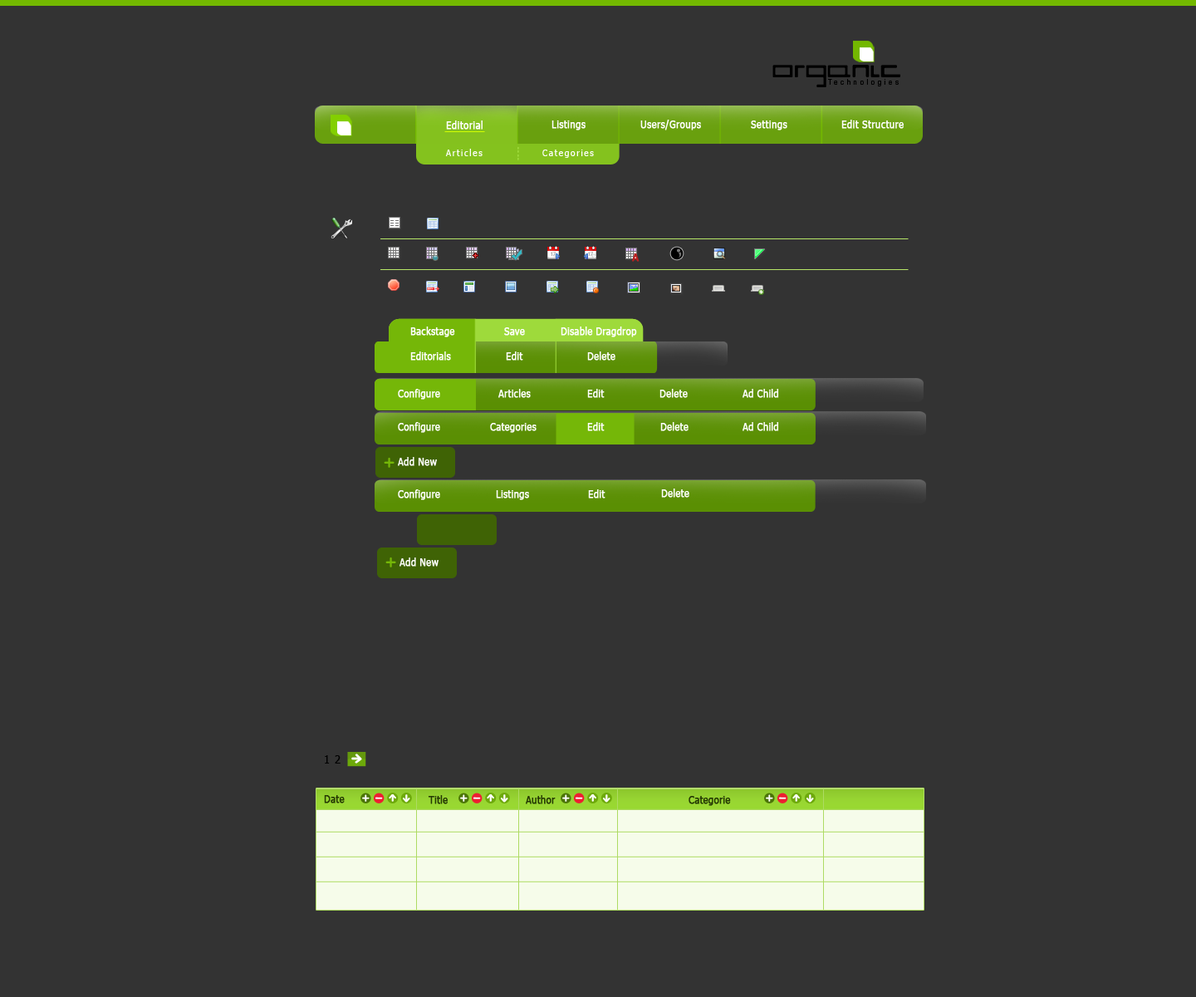
<style>
.page{position:relative;width:1196px;height:997px;background:#333333}
.page>*{position:absolute;margin:0}
.t1{font:53.1px "Jiggajigga";letter-spacing:-0.03em;color:#000000}
.t2{font:7px "EurostileLTStd-Cn";letter-spacing:0.4em;color:#000000;scale:1.08 1}
.t3{font:10px "Tahoma";letter-spacing:0.02em;color:#ffffff;font-weight:bold;scale:0.94 1}
.t4{font:9.1px "Tahoma";letter-spacing:0.15em;color:#ffffff;scale:0.94 1}
.t5{font:8.3px "Tahoma";letter-spacing:0.1em;color:#abe649;scale:0.94 1}
.t6{font:10px "Tahoma";letter-spacing:0.005em;color:#ffffff;font-weight:bold;scale:0.94 1}
.t7{font:11.6px "Tahoma";letter-spacing:0.005em;color:#000000;scale:0.94 1}
.t8{font:10px "Tahoma";letter-spacing:0.005em;color:#253903;font-weight:bold;scale:0.94 1}
.t9{font:10px "Tahoma";letter-spacing:0.005em;color:#243803;font-weight:bold;scale:0.94 1}
</style>
<div class="page">
<p class="t1" style="left:773px;top:56px;width:127px;height:31px">ORGANIC</p>
<p class="t2" style="left:828px;top:79px;width:71px;height:7px">Technologies</p>
<p class="t3" style="left:446px;top:120px;width:37px;height:10px">Editorial</p>
<p class="t3" style="left:552px;top:120px;width:34px;height:10px">Listings</p>
<p class="t3" style="left:640px;top:120px;width:61px;height:10px">Users/Groups</p>
<p class="t3" style="left:751px;top:120px;width:37px;height:10px">Settings</p>
<p class="t3" style="left:842px;top:120px;width:62px;height:9px">Edit Structure</p>
<p class="t4" style="left:445px;top:149px;width:38px;height:7px">Articles</p>
<p class="t5" style="left:518px;top:146px;width:1px;height:14px;rotate:-90deg">----</p>
<p class="t4" style="left:542px;top:150px;width:52px;height:8px">Categories</p>
<p class="t6" style="left:410px;top:326px;width:45px;height:11px">Backstage</p>
<p class="t6" style="left:504px;top:327px;width:21px;height:9px">Save</p>
<p class="t6" style="left:561px;top:326px;width:76px;height:11px">Disable Dragdrop</p>
<p class="t6" style="left:410px;top:351px;width:41px;height:10px">Editorials</p>
<p class="t6" style="left:506px;top:351px;width:17px;height:10px">Edit</p>
<p class="t6" style="left:587px;top:351px;width:29px;height:10px">Delete</p>
<p class="t6" style="left:398px;top:389px;width:42px;height:11px">Configure</p>
<p class="t6" style="left:498px;top:389px;width:33px;height:9px">Articles</p>
<p class="t6" style="left:587px;top:389px;width:18px;height:9px">Edit</p>
<p class="t6" style="left:660px;top:389px;width:28px;height:9px">Delete</p>
<p class="t6" style="left:743px;top:389px;width:36px;height:9px">Ad Child</p>
<p class="t6" style="left:398px;top:422px;width:42px;height:11px">Configure</p>
<p class="t6" style="left:490px;top:423px;width:47px;height:10px">Categories</p>
<p class="t6" style="left:587px;top:422px;width:18px;height:9px">Edit</p>
<p class="t6" style="left:660px;top:422px;width:29px;height:9px">Delete</p>
<p class="t6" style="left:743px;top:422px;width:36px;height:9px">Ad Child</p>
<p class="t6" style="left:398px;top:457px;width:39px;height:9px">Add New</p>
<p class="t6" style="left:398px;top:489px;width:42px;height:11px">Configure</p>
<p class="t6" style="left:496px;top:490px;width:33px;height:10px">Listings</p>
<p class="t6" style="left:588px;top:489px;width:18px;height:9px">Edit</p>
<p class="t6" style="left:661px;top:488px;width:28px;height:10px">Delete</p>
<p class="t6" style="left:400px;top:557px;width:39px;height:10px">Add New</p>
<p class="t7" style="left:325px;top:755px;width:5px;height:8px">1</p>
<p class="t7" style="left:335px;top:755px;width:6px;height:8px">2</p>
<p class="t8" style="left:324px;top:795px;width:21px;height:8px">Date</p>
<p class="t9" style="left:428px;top:795px;width:20px;height:9px">Title</p>
<p class="t9" style="left:526px;top:795px;width:30px;height:9px">Author</p>
<p class="t9" style="left:689px;top:796px;width:42px;height:10px">Categorie</p>
</div>
